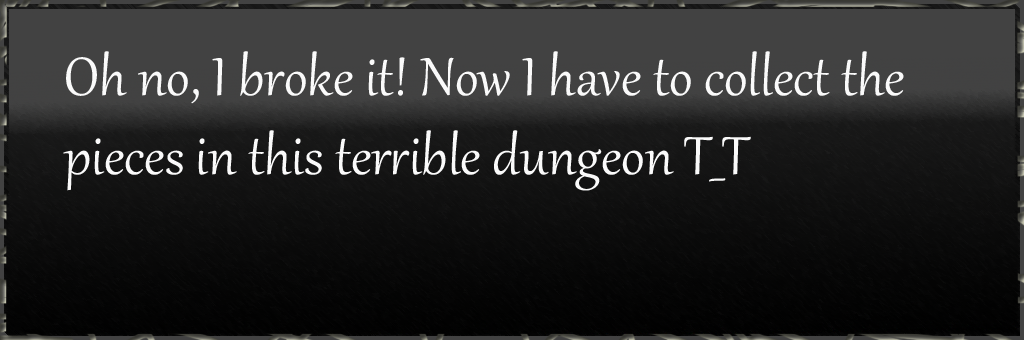
<style>
.page{position:relative;width:1024px;height:340px}
.page>*{position:absolute;margin:0}
.t1{font:66px "Gabriola";color:#fafafa}
</style>
<div class="page">
<p class="t1" style="left:63px;top:51px;width:841px;height:140px">Oh no, I broke it! Now I have to collect the<br>pieces in this terrible dungeon T_T</p>
</div>
